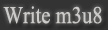
<style>
.page{position:relative;width:108px;height:30px;background:#333333}
.page>*{position:absolute;margin:0}
.t1{font:24px "TimesNewRomanPSMT";color:#cdcbc9;scale:0.86 1}
</style>
<div class="page">
<p class="t1" style="left:3px;top:6px;width:99px;height:18px">Write m3u8</p>
</div>
